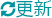
<style>
.page{position:relative;width:52px;height:18px;background:#ffffff}
.page>*{position:absolute;margin:0}
.t1{font:18px "MicrosoftYaHeiUI";color:#02949d}
</style>
<div class="page">
<p class="t1" style="left:16px;top:0px;width:36px;height:18px">更新</p>
</div>
